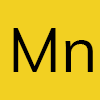
<style>
.page{position:relative;width:100px;height:100px;background:#f2d022}
.page>*{position:absolute;margin:0}
.t1{font:62.5px "Muli-Regular";color:#000000}
</style>
<div class="page">
<p class="t1" style="left:13px;top:28px;width:80px;height:44px">Mn</p>
</div>
